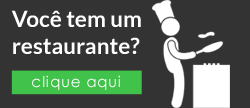
<style>
.page{position:relative;width:250px;height:108px;background:#333333}
.page>*{position:absolute;margin:0}
.t1{font:22.4px "Lato-Bold";color:#ffffff}
.t2{font:15px "CenturyGothic";letter-spacing:0.05em;color:#ffffff}
</style>
<div class="page">
<p class="t1" style="left:11px;top:10px;width:130px;height:44px">Você tem um<br>restaurante?</p>
<p class="t2" style="left:32px;top:75px;width:88px;height:15px">clique aqui</p>
</div>
